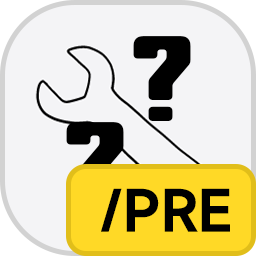
<style>
.page{position:relative;width:256px;height:256px;background:#f4f4f6}
.page>*{position:absolute;margin:0}
.t1{font:150px "YouSheBiaoTiYuan";color:#000000}
.t2{font:54.2px "MiSans-Semibold";color:#000000}
</style>
<div class="page">
<p class="t1" style="left:133px;top:36px;width:58px;height:85px">?</p>
<p class="t1" style="left:66px;top:122px;width:58px;height:85px">?</p>
<p class="t2" style="left:101px;top:188px;width:129px;height:44px">/PRE</p>
</div>
